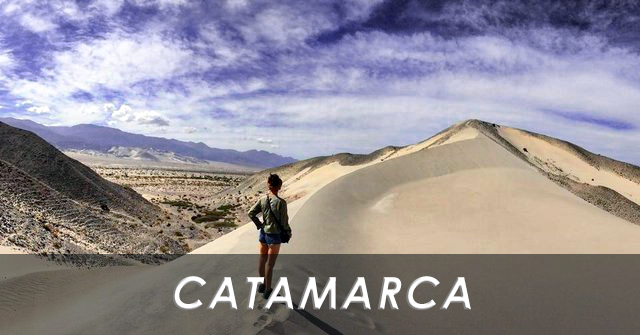
<style>
.page{position:relative;width:640px;height:335px}
.page>*{position:absolute;margin:0}
.t1{font:44.5px "CenturyGothic-Bold";letter-spacing:0.05em;color:#ffffff;font-style:italic}
</style>
<div class="page">
<p class="t1" style="left:172px;top:276px;width:299px;height:35px">CATAMARCA</p>
</div>
